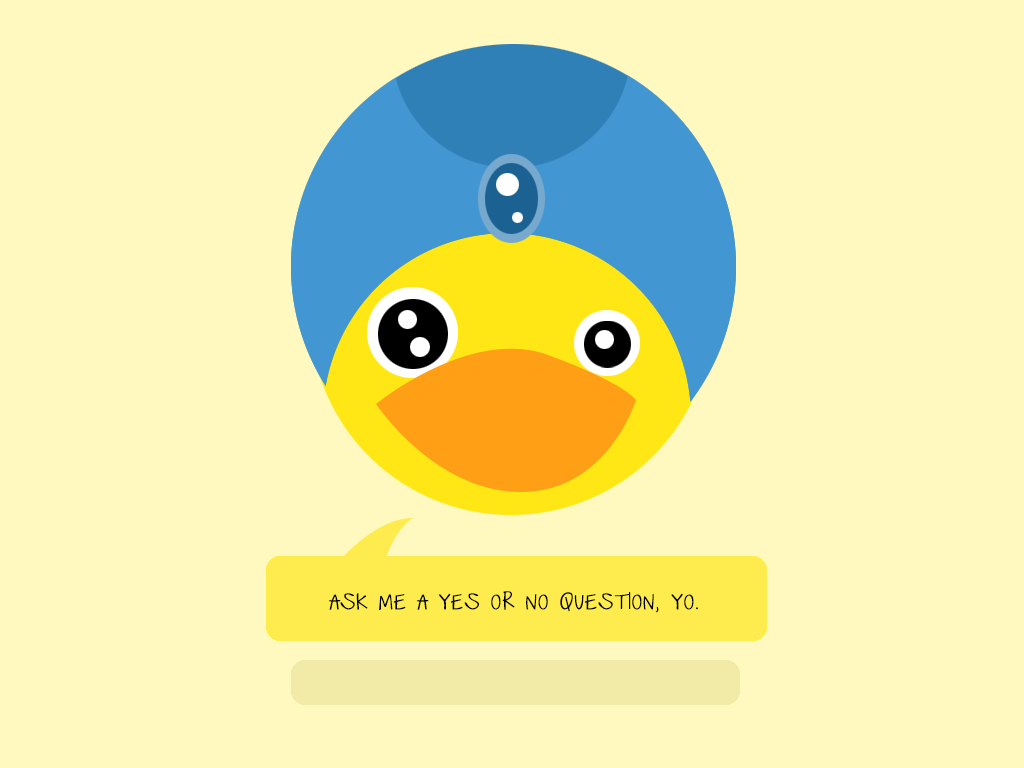
<style>
.page{position:relative;width:1024px;height:768px;background:#fff9c0}
.page>*{position:absolute;margin:0}
.t1{font:18px "JustTheWayYouAre";letter-spacing:0.05em;color:#000000;font-weight:bold}
</style>
<div class="page">
<p class="t1" style="left:329px;top:591px;width:369px;height:22px">ASK ME A YES OR NO QUESTION, YO.</p>
</div>
